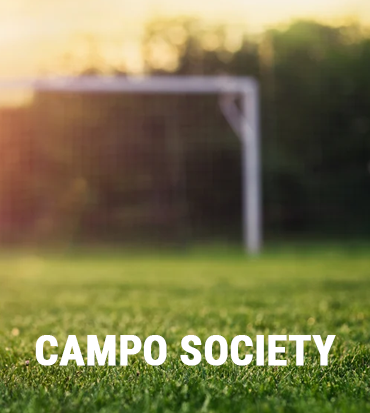
<style>
.page{position:relative;width:370px;height:413px}
.page>*{position:absolute;margin:0}
.t1{font:41.6px "RobotoCondensed-Bold";color:#ffffff;font-weight:bold}
</style>
<div class="page">
<p class="t1" style="left:35px;top:335px;width:301px;height:31px">CAMPO SOCIETY</p>
</div>
